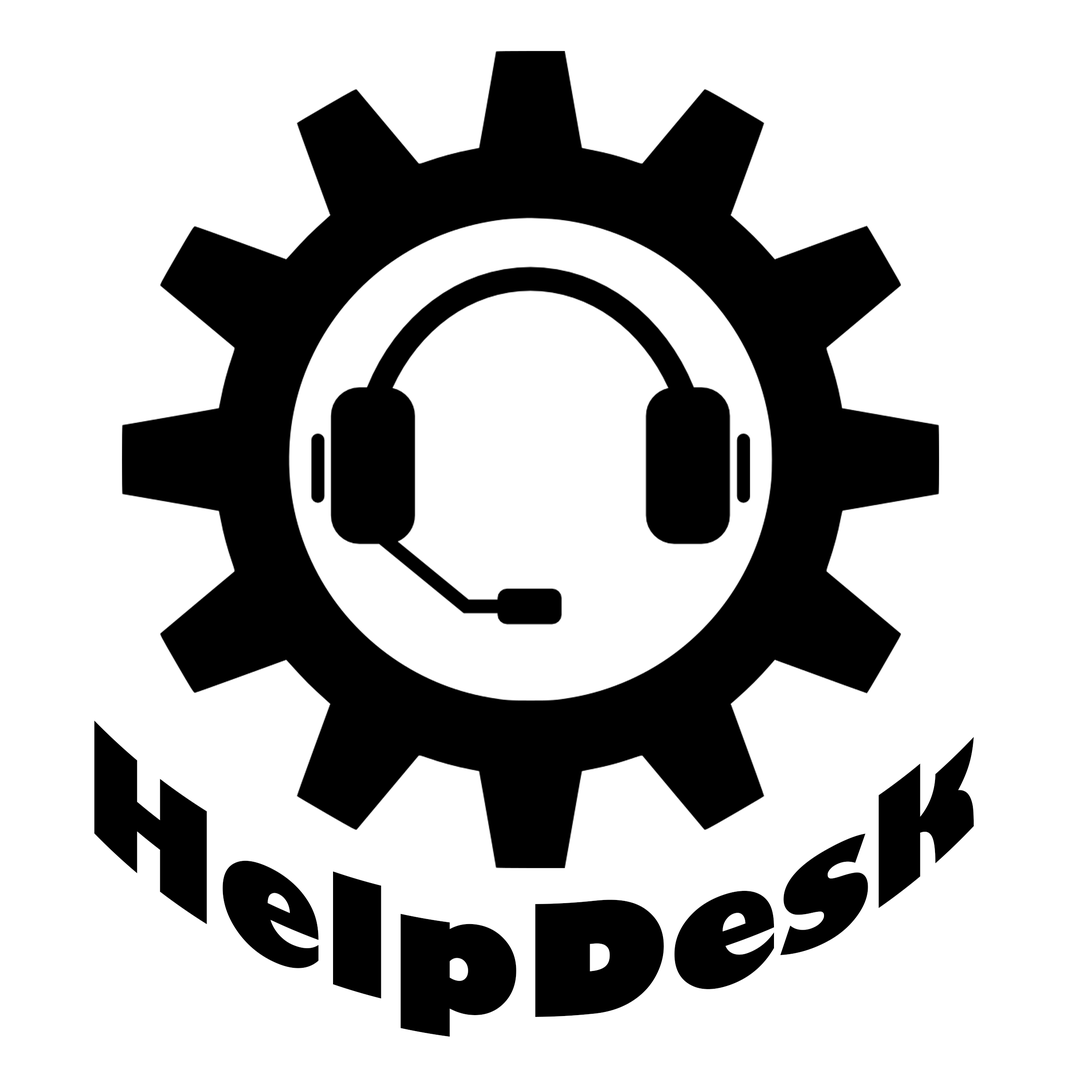
<style>
.page{position:relative;width:1092px;height:1092px;background:#ffffff}
.page>*{position:absolute;margin:0}
.t1{font:151.7px/151.7px "GillSans-UltraBold";color:#000000}
</style>
<div class="page">
<p class="t1" style="left:94px;top:720px;width:880px;height:317px;text-align:center">HelpDesk</p>
</div>
